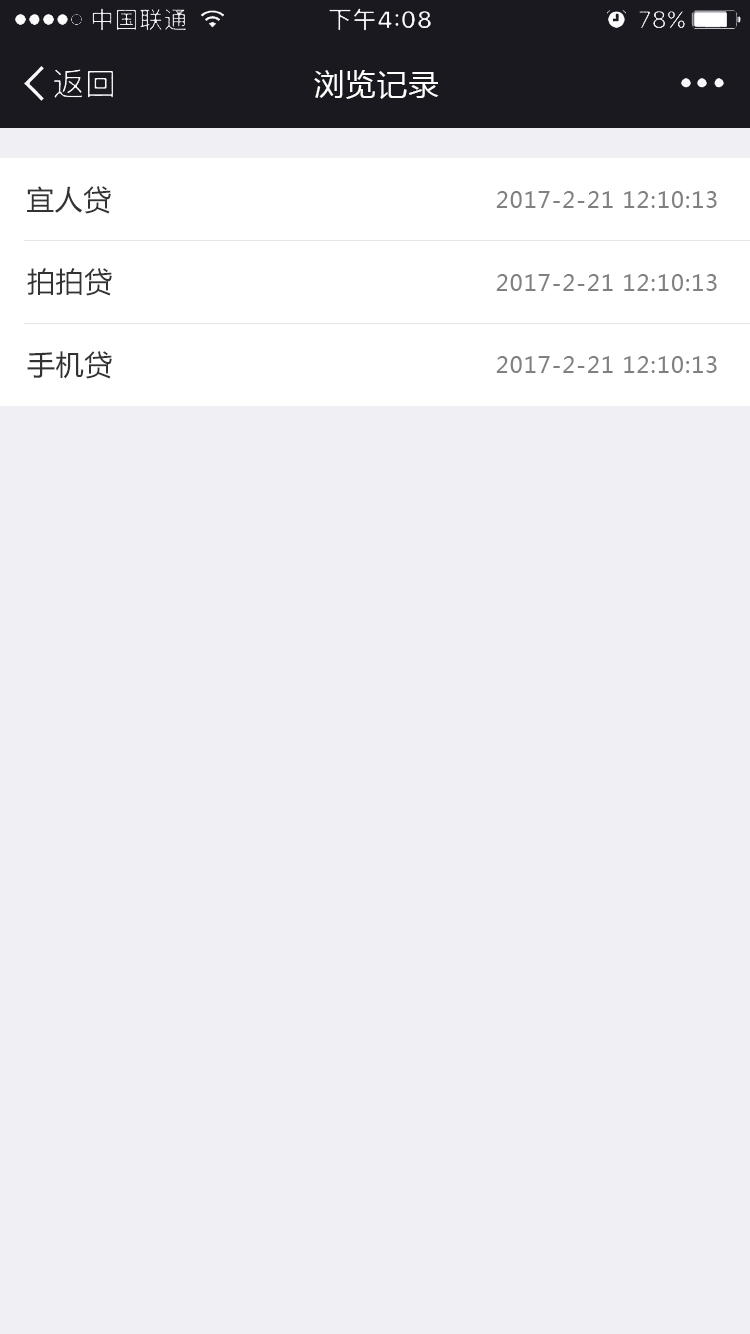
<style>
.page{position:relative;width:750px;height:1334px;background:#efeff4}
.page>*{position:absolute;margin:0}
.t1{font:30px "MicrosoftYaHei";letter-spacing:0.05em;color:#fffefe}
.t2{font:28px "MicrosoftYaHei";letter-spacing:0.02em;color:#333333}
.t3{font:22px "MicrosoftYaHei";letter-spacing:0.05em;color:#808080}
</style>
<div class="page">
<p class="t1" style="left:314px;top:70px;width:125px;height:29px">浏览记录</p>
<p class="t2" style="left:27px;top:186px;width:84px;height:28px">宜人贷</p>
<p class="t3" style="left:496px;top:191px;width:221px;height:17px">2017-2-21 12:10:13</p>
<p class="t2" style="left:27px;top:268px;width:85px;height:28px">拍拍贷</p>
<p class="t3" style="left:496px;top:274px;width:221px;height:17px">2017-2-21 12:10:13</p>
<p class="t2" style="left:27px;top:351px;width:85px;height:28px">手机贷</p>
<p class="t3" style="left:496px;top:356px;width:221px;height:17px">2017-2-21 12:10:13</p>
</div>
